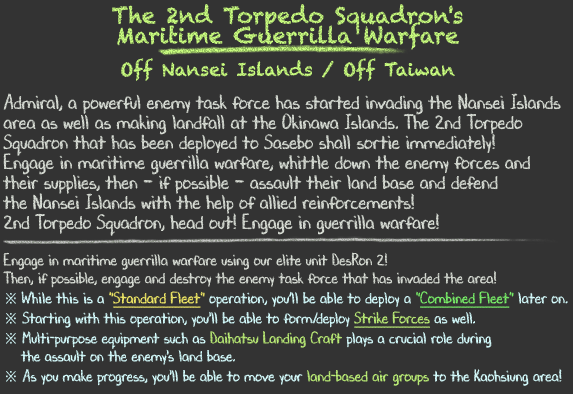
<style>
.page{position:relative;width:573px;height:394px;background:#333333}
.page>*{position:absolute;margin:0}
.t1{font:18px/36px "Chalkduster";color:#bded78}
.t2{font:22px/20px "Chalkduster";color:#bded78}
.t3{font:22px/36px "Chalkduster";color:#bded78}
.t4{font:20px/20px "DJBChalkItUp";color:#d9ded6;scale:0.9 1}
.t5{font:16px/18px "DJBChalkItUp";color:#d9ded6;scale:0.9 1}
.t6{font:16px/20px "DJBChalkItUp";color:#d9ded6;scale:0.9 1}
.t7{font:16px/20px "TimesNewRomanPSMT";color:#d7feff;scale:0.9 1}
.t8{font:16px/20px "DJBChalkItUp";color:#d7feff;scale:0.9 1}
.t9{font:16px/20px "DJBChalkItUp";color:#f5ed68;scale:0.9 1}
.t10{font:16px/20px "DJBChalkItUp";color:#f5ed68;text-decoration:underline;scale:0.9 1}
.t11{font:16px/20px "DJBChalkItUp";color:#7bf26b;scale:0.9 1}
.t12{font:16px/20px "DJBChalkItUp";color:#7bf26b;text-decoration:underline;scale:0.9 1}
.t13{font:16px/20px "DJBChalkItUp";color:#bdef78;text-decoration:underline;scale:0.9 1}
.t14{font:16px/18px "TimesNewRomanPSMT";color:#d7feff;scale:0.9 1}
.t15{font:16px/18px "DJBChalkItUp";color:#d7feff;scale:0.9 1}
.t16{font:16px/18px "DJBChalkItUp";color:#bdef78;scale:0.9 1}
</style>
<div class="page">
<p class="t1" style="left:112px;top:4px;width:351px;height:77px;text-align:center"><span class="t2">The 2nd Torpedo Squadron's<br></span><span class="t3">Maritime Guerrilla Warfare<br></span>Off Nansei Islands / Off Taiwan</p>
<p class="t4" style="left:3px;top:93px;width:565px;height:293px">Admiral, a powerful enemy task force has started invading the Nansei Islands<br>area as well as making landfall at the Okinawa Islands. The 2nd Torpedo<br>Squadron that has been deployed to Sasebo shall sortie immediately!<br>Engage in maritime guerrilla warfare, whittle down the enemy forces and<br>their supplies, then — if possible — assault their land base and defend<br>the Nansei Islands with the help of allied reinforcements!<br>2nd Torpedo Squadron, head out! Engage in guerrilla warfare!<br><br><span class="t5">Engage in maritime guerrilla warfare using our elite unit DesRon 2!<br></span><span class="t6">Then, if possible, engage and destroy the enemy task force that has invaded the area!<br></span><span class="t7">※ </span><span class="t8">While this is a </span><span class="t9">"</span><span class="t10">Standard Fleet</span><span class="t9">"</span><span class="t8"> operation, you’ll be able to deploy a </span><span class="t11">"</span><span class="t12">Combined Fleet</span><span class="t11">" </span><span class="t8">later on.<br></span><span class="t7">※</span><span class="t8"> Starting with this operation, you'll be able to form/deploy </span><span class="t13">Strike Forces</span><span class="t8"> as well.<br></span><span class="t14">※</span><span class="t15"> Multi-purpose equipment such as </span><span class="t16">Daihatsu Landing Craft</span><span class="t15"> plays a crucial role during<br>　 </span><span class="t8">the assault on the enemy's land base.<br></span><span class="t14">※</span><span class="t15"> As you make progress, you'll be able to move your </span><span class="t16">land-based air groups</span><span class="t15"> to the Kaohsiung area!</span></p>
</div>
